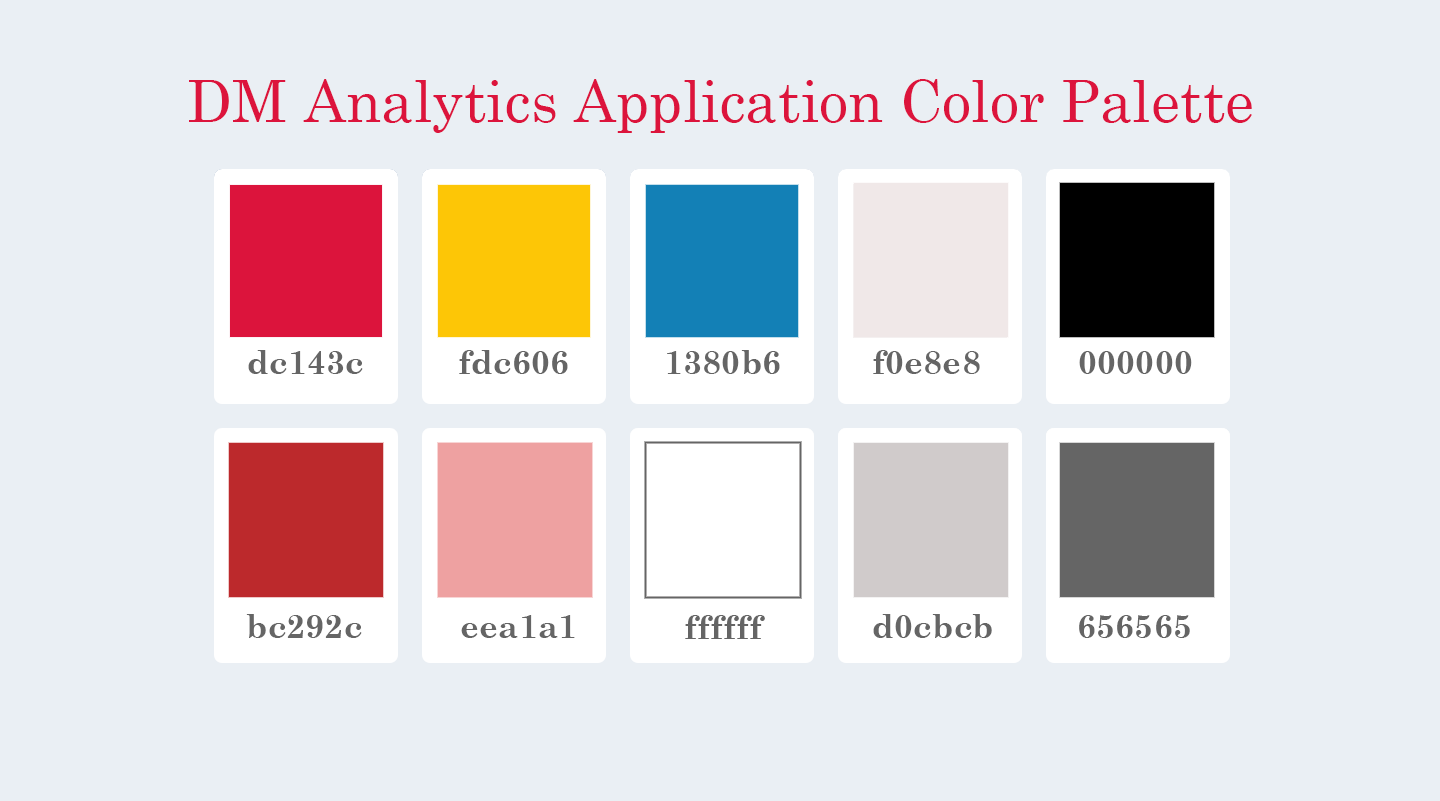
<style>
.page{position:relative;width:1440px;height:801px;background:#eaeff4}
.page>*{position:absolute;margin:0}
.t1{font:58.3px "CenturySchoolbook";color:#dc143c}
.t2{font:33.3px "CenturySchoolbook-Bold";color:#656565}
</style>
<div class="page">
<p class="t1" style="left:189px;top:79px;width:1063px;height:54px">DM Analytics Application Color Palette</p>
<p class="t2" style="left:248px;top:350px;width:115px;height:24px">dc143c</p>
<p class="t2" style="left:459px;top:350px;width:109px;height:24px">fdc606</p>
<p class="t2" style="left:667px;top:350px;width:113px;height:24px">1380b6</p>
<p class="t2" style="left:873px;top:350px;width:107px;height:24px">f0e8e8</p>
<p class="t2" style="left:1079px;top:351px;width:113px;height:23px">000000</p>
<p class="t2" style="left:246px;top:614px;width:116px;height:24px">bc292c</p>
<p class="t2" style="left:461px;top:615px;width:114px;height:23px">eea1a1</p>
<p class="t2" style="left:685px;top:615px;width:80px;height:24px">ffffff</p>
<p class="t2" style="left:873px;top:614px;width:119px;height:24px">d0cbcb</p>
<p class="t2" style="left:1079px;top:615px;width:111px;height:23px">656565</p>
</div>
